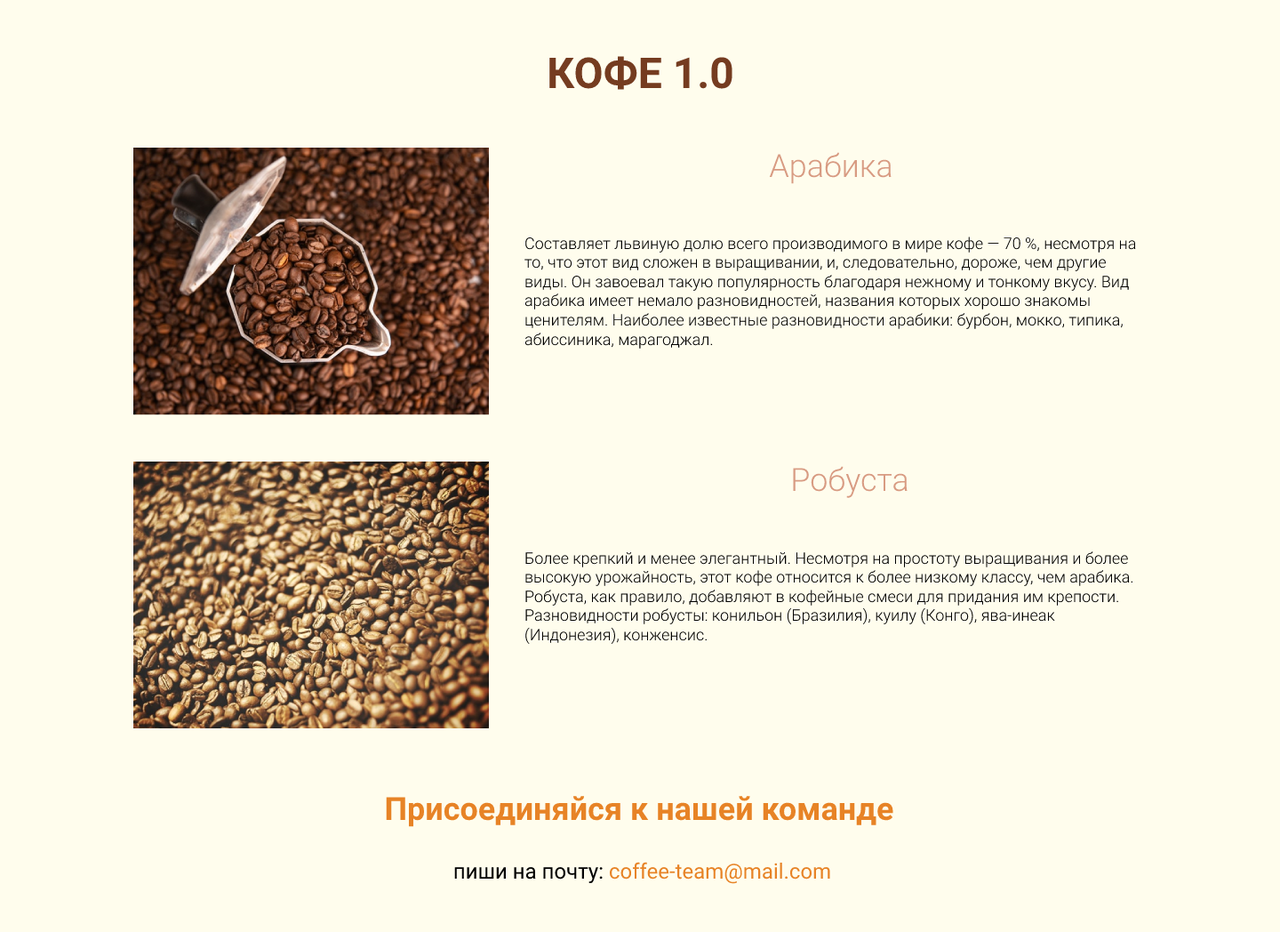
<style>
.page{position:relative;width:1280px;height:932px;background:#fffded}
.page>*{position:absolute;margin:0}
.t1{font:42.7px "Roboto-Bold";color:#753c20;text-transform:uppercase}
.t2{font:32px "Roboto-Light";color:#d89b82}
.t3{font:16px "Roboto-Light";color:#000000}
.t4{font:32px "Roboto-Bold";color:#e78326}
.t5{font:21.3px "Roboto-Regular";color:#e78326}
.t6{font:21.3px "Roboto-Regular";color:#000000}
</style>
<div class="page">
<p class="t1" style="left:549px;top:56px;width:183px;height:34px">КОФЕ 1.0</p>
<p class="t2" style="left:769px;top:152px;width:123px;height:32px">Арабика</p>
<p class="t3" style="left:524px;top:236px;width:612px;height:112px">Составляет львиную долю всего производимого в мире кофе — 70 %, несмотря на то, что этот вид сложен в выращивании, и, следовательно, дороже, чем другие виды. Он завоевал такую популярность благодаря нежному и тонкому вкусу. Вид арабика имеет немало разновидностей, названия которых хорошо знакомы ценителям. Наиболее известные разновидности арабики: бурбон, мокко, типика, абиссиника, марагоджал.</p>
<p class="t2" style="left:793px;top:466px;width:115px;height:32px">Робуста</p>
<p class="t3" style="left:525px;top:551px;width:608px;height:93px">Более крепкий и менее элегантный. Несмотря на простоту выращивания и более высокую урожайность, этот кофе относится к более низкому классу, чем арабика. Робуста, как правило, добавляют в кофейные смеси для придания им крепости. Разновидности робусты: конильон (Бразилия), куилу (Конго), ява-инеак (Индонезия), конженсис.</p>
<p class="t4" style="left:386px;top:796px;width:507px;height:31px">Присоединяйся к нашей команде</p>
<p class="t5" style="left:454px;top:861px;width:376px;height:23px"><span class="t6">пиши на почту: </span>coffee-team@mail.com</p>
</div>
